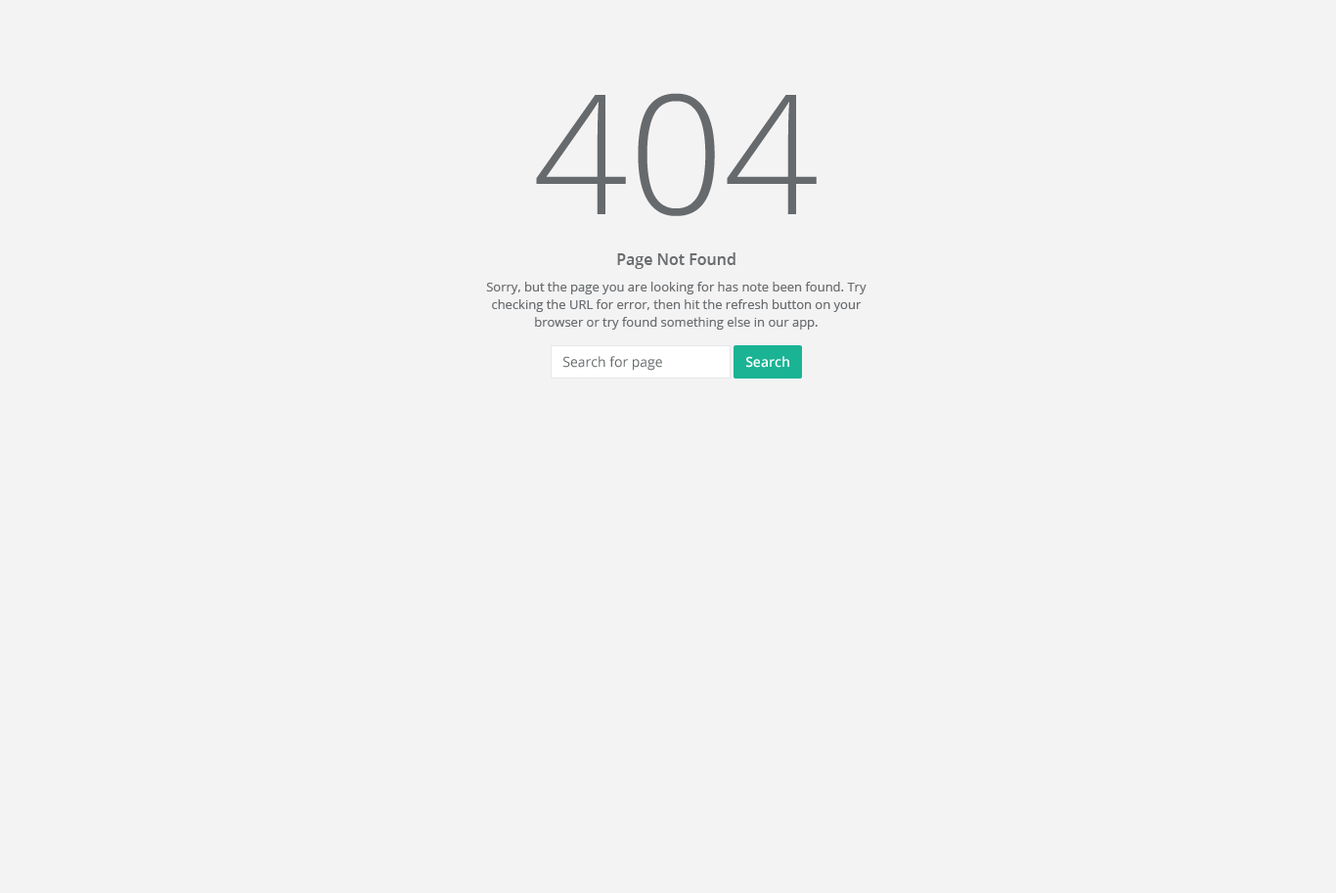
<style>
.page{position:relative;width:1336px;height:893px;background:#f3f3f4}
.page>*{position:absolute;margin:0}
.t1{font:166.2px "OpenSans-Light";color:#676a6c}
.t2{font:15.6px "OpenSans-Semibold";color:#6b6e70}
.t3{font:12.7px/17.6px "OpenSans";color:#6b6e70}
.t4{font:13.7px "OpenSans";color:#676a6c}
.t5{font:13.7px "OpenSans-Semibold";color:#ffffff}
</style>
<div class="page">
<p class="t1" style="left:536px;top:93px;width:280px;height:123px">404</p>
<p class="t2" style="left:617px;top:252px;width:118px;height:17px">Page Not Found</p>
<p class="t3" style="left:486px;top:282px;width:380px;height:48px;text-align:center">Sorry, but the page you are looking for has note been found. Try checking the URL for error, then hit the refresh button on your browser or try found something else in our app.</p>
<p class="t4" style="left:563px;top:356px;width:99px;height:15px">Search for page</p>
<p class="t5" style="left:746px;top:356px;width:43px;height:12px">Search</p>
</div>
